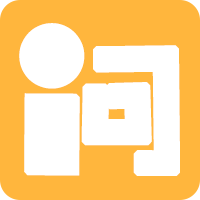
<style>
.page{position:relative;width:200px;height:200px;background:#ffb63d}
.page>*{position:absolute;margin:0}
.t1{font:252.8px "HYZhuZiTongNianTiW";letter-spacing:0.02em;color:#ffffff;font-weight:bold}
</style>
<div class="page">
<p class="t1" style="left:19px;top:23px;width:161px;height:153px">问</p>
</div>
